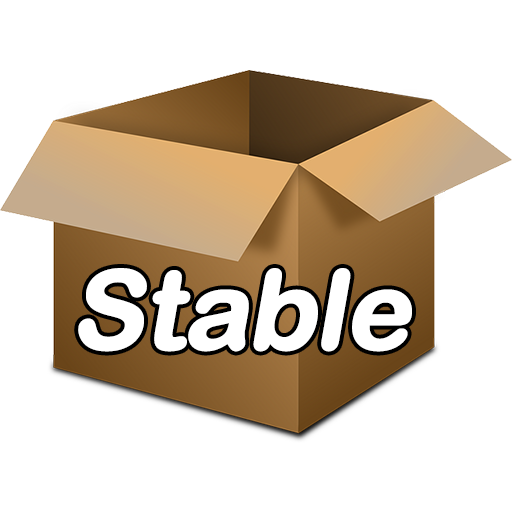
<style>
.page{position:relative;width:512px;height:512px;background:#ffffff}
.page>*{position:absolute;margin:0}
.t1{font:108.3px "ArialRoundedMTBold";letter-spacing:-0.02em;color:#ffffff;font-weight:bold;font-style:italic}
</style>
<div class="page">
<p class="t1" style="left:78px;top:268px;width:334px;height:84px">Stable</p>
</div>
